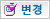
<style>
.page{position:relative;width:50px;height:19px;background:#ffffff}
.page>*{position:absolute;margin:0}
.t1{font:11px "MalgunGothicBold";color:#04689f}
</style>
<div class="page">
<p class="t1" style="left:21px;top:4px;width:21px;height:11px">변경</p>
</div>
